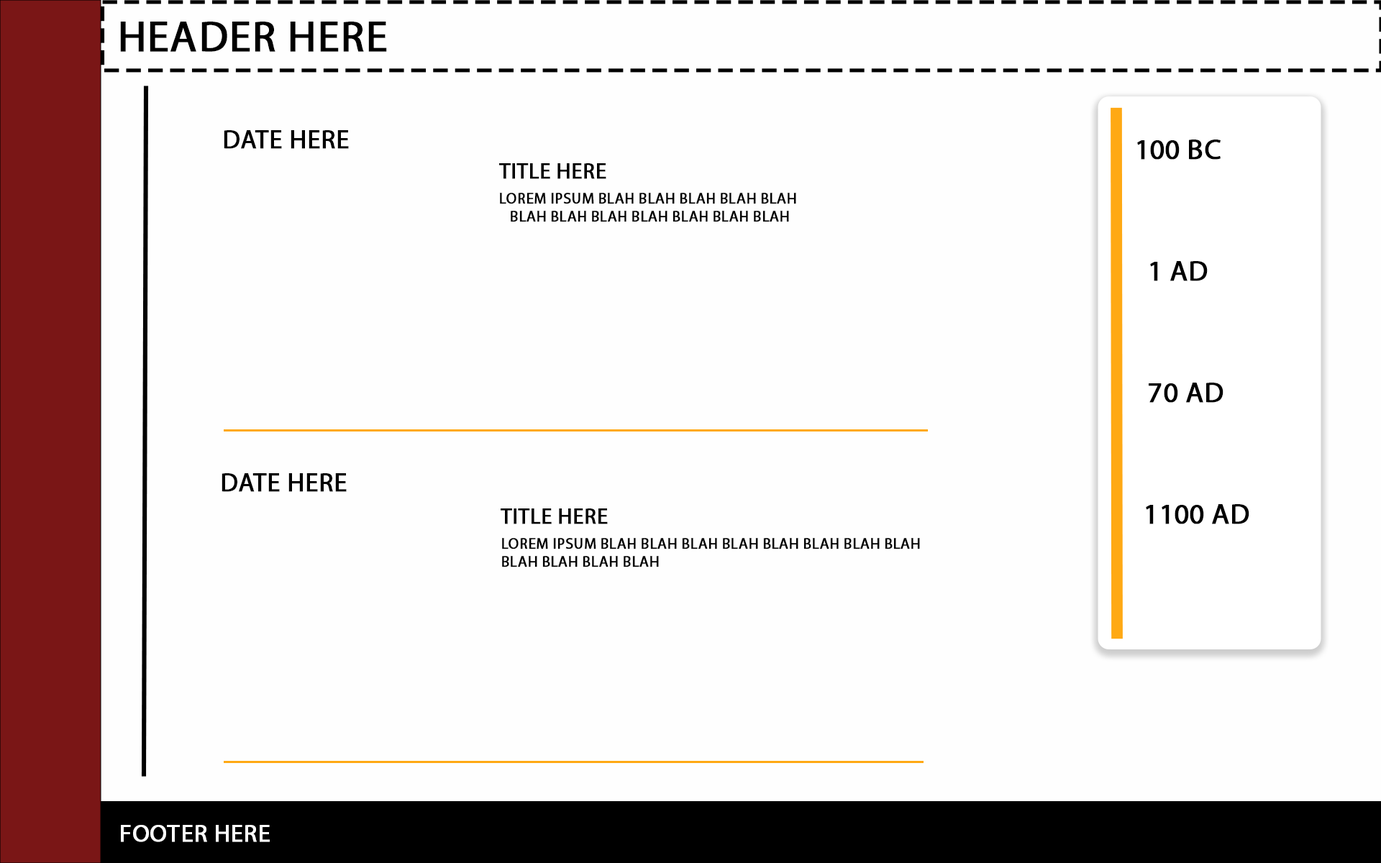
<style>
.page{position:relative;width:1381px;height:863px;background:#fefefe}
.page>*{position:absolute;margin:0}
.t1{font:43.2px "MyriadPro-Regular";letter-spacing:-0.005em;color:#000000;text-transform:uppercase;font-weight:bold}
.t2{font:25.9px "MyriadPro-Regular";letter-spacing:-0.005em;color:#000000;text-transform:uppercase;font-weight:bold}
.t3{font:28.7px "MyriadPro-Regular";letter-spacing:-0.005em;color:#000000;text-transform:uppercase;font-weight:bold}
.t4{font:21.6px "MyriadPro-Regular";letter-spacing:-0.005em;color:#000000;text-transform:uppercase;font-weight:bold}
.t5{font:15.1px "MyriadPro-Regular";letter-spacing:-0.005em;color:#000000;text-transform:uppercase;font-weight:bold}
.t6{font:24.5px "MyriadPro-Regular";letter-spacing:-0.005em;color:#fefefe;text-transform:uppercase;font-weight:bold}
</style>
<div class="page">
<p class="t1" style="left:120px;top:22px;width:267px;height:30px">Header here</p>
<p class="t2" style="left:224px;top:130px;width:125px;height:19px">Date here</p>
<p class="t3" style="left:1137px;top:140px;width:84px;height:20px">100 BC</p>
<p class="t4" style="left:499px;top:163px;width:107px;height:16px">title here</p>
<p class="t5" style="left:500px;top:193px;width:296px;height:29px;text-align:center">Lorem Ipsum blah blah blah blah blah <br>blah blah blah blah blah blah blah</p>
<p class="t3" style="left:1150px;top:261px;width:58px;height:20px">1 AD</p>
<p class="t3" style="left:1149px;top:383px;width:75px;height:20px">70 ad</p>
<p class="t2" style="left:222px;top:473px;width:125px;height:19px">Date here</p>
<p class="t4" style="left:501px;top:509px;width:107px;height:15px">title here</p>
<p class="t3" style="left:1146px;top:504px;width:104px;height:20px">1100 AD</p>
<p class="t5" style="left:502px;top:538px;width:418px;height:30px">Lorem Ipsum blah blah blah blah blah blah blah blah <br>blah blah blah blah</p>
<p class="t6" style="left:121px;top:825px;width:149px;height:17px">Footer Here</p>
</div>
